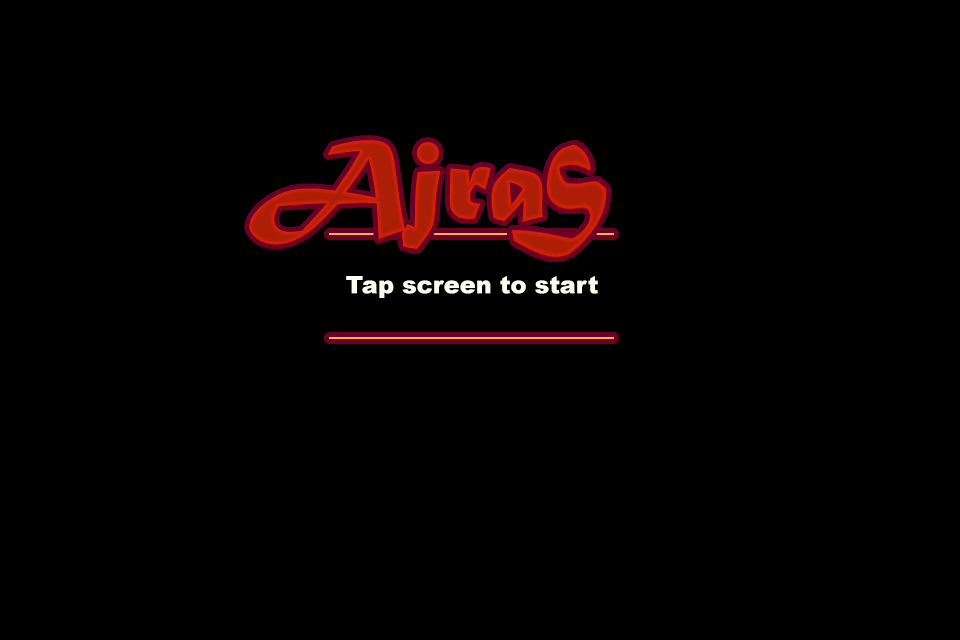
<style>
.page{position:relative;width:960px;height:640px;background:#000000}
.page>*{position:absolute;margin:0}
.t1{font:24px "Arial-Black";color:#fffff0}
</style>
<div class="page">
<p class="t1" style="left:346px;top:276px;width:252px;height:22px">Tap screen to start</p>
</div>
